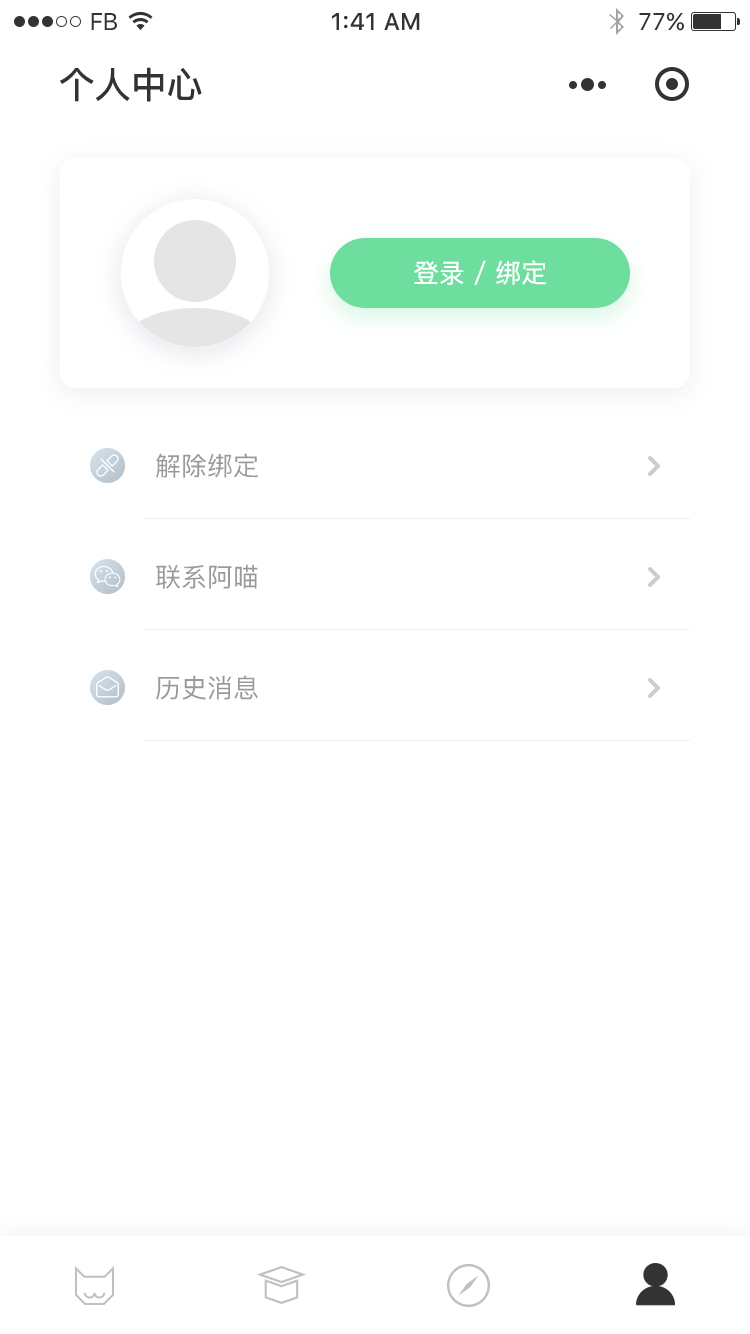
<style>
.page{position:relative;width:750px;height:1334px;background:#ffffff}
.page>*{position:absolute;margin:0}
.t1{font:24px "SFUIText-Regular";letter-spacing:-0.025em;color:#333333}
.t2{font:24px "SFUIText-Medium";color:#333333}
.t3{font:24px "SFUIText-Regular";color:#333333}
.t4{font:36px "PingFangSC-Medium";color:#333333}
.t5{font:26px "PingFangSC-Regular";color:#ffffff}
.t6{font:26px "PingFangSC-Regular";color:#999999}
</style>
<div class="page">
<p class="t1" style="left:91px;top:13px;width:26px;height:17px">FB</p>
<p class="t2" style="left:332px;top:13px;width:88px;height:17px">1:41 AM</p>
<p class="t3" style="left:639px;top:12px;width:45px;height:19px">77%</p>
<p class="t4" style="left:60px;top:67px;width:142px;height:35px">个人中心</p>
<p class="t5" style="left:414px;top:260px;width:132px;height:25px">登录 / 绑定</p>
<p class="t6" style="left:156px;top:453px;width:102px;height:25px">解除绑定</p>
<p class="t6" style="left:156px;top:564px;width:102px;height:25px">联系阿喵</p>
<p class="t6" style="left:156px;top:675px;width:102px;height:25px">历史消息</p>
</div>
